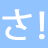
<style>
.page{position:relative;width:48px;height:48px;background:#91c3ff}
.page>*{position:absolute;margin:0}
.t1{font:35px "KozGoPr6N-Regular";color:#ffffff;font-weight:bold}
</style>
<div class="page">
<p class="t1" style="left:2px;top:9px;width:43px;height:31px">さ！</p>
</div>
